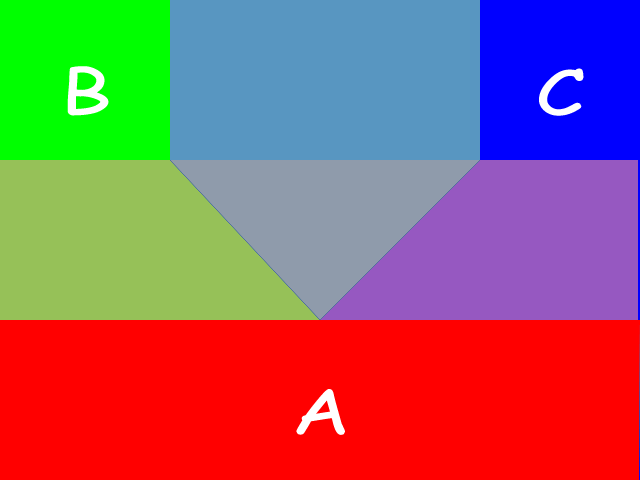
<style>
.page{position:relative;width:640px;height:480px;background:#ff0000}
.page>*{position:absolute;margin:0}
.t1{font:62px "ComicSansMS";color:#ffffff;scale:1.31 1}
</style>
<div class="page">
<p class="t1" style="left:67px;top:66px;width:42px;height:50px">B</p>
<p class="t1" style="left:539px;top:68px;width:45px;height:48px">C</p>
<p class="t1" style="left:296px;top:389px;width:49px;height:46px">A</p>
</div>
